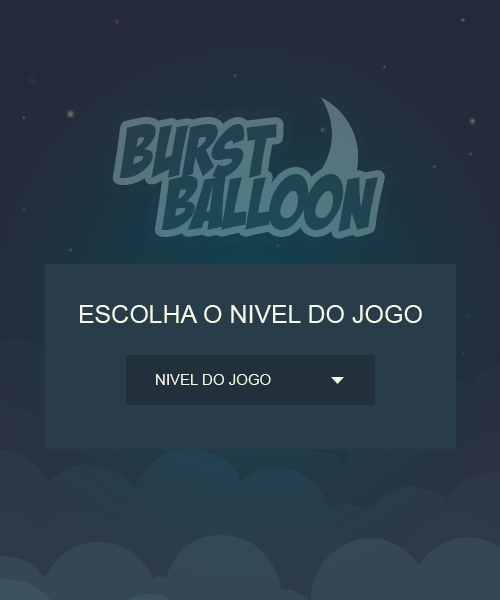
<style>
.page{position:relative;width:500px;height:600px;background:#293c4a}
.page>*{position:absolute;margin:0}
.t1{font:72px/51.6px "BadaBoomBB";color:#214452;text-transform:uppercase}
.t2{font:25px "ArialMT";color:#f6fae8;text-transform:uppercase}
.t3{font:15px "ArialMT";color:#f6fae8;text-transform:uppercase}
</style>
<div class="page">
<p class="t1" style="left:119px;top:124px;width:259px;height:108px">burst<br>   balloon</p>
<p class="t1" style="left:119px;top:124px;width:259px;height:108px">burst<br>   balloon</p>
<p class="t2" style="left:80px;top:305px;width:342px;height:18px">Escolha o nivel do jogo</p>
<p class="t3" style="left:156px;top:374px;width:115px;height:11px">nivel do jogo</p>
</div>
